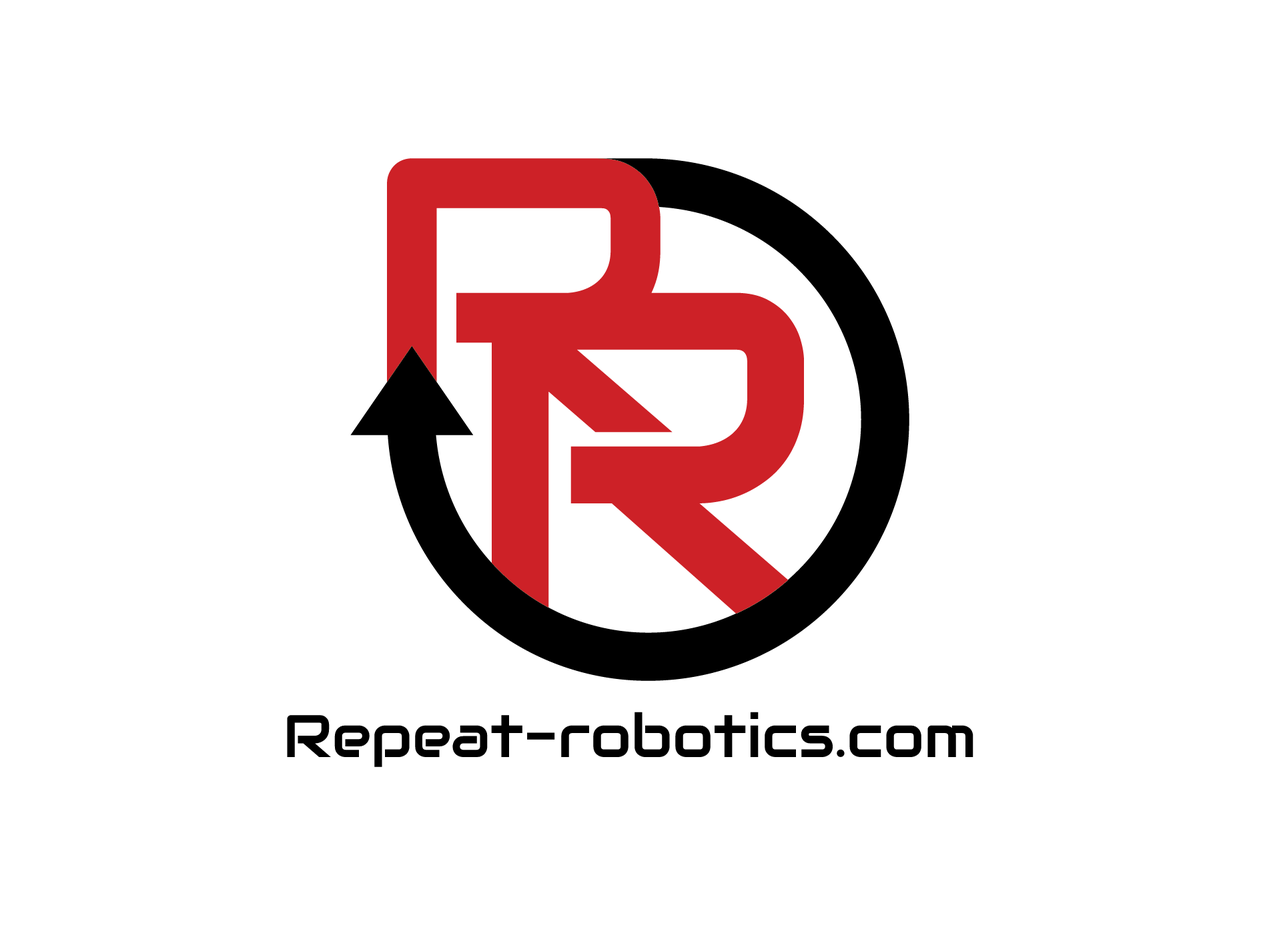
<style>
.page{position:relative;width:1261px;height:946px;background:#ffffff}
.page>*{position:absolute;margin:0}
.t1{font:59.8px "Audiowide-Regular";color:#000000}
</style>
<div class="page">
<p class="t1" style="left:287px;top:711px;width:687px;height:56px">Repeat-robotics.com</p>
</div>
